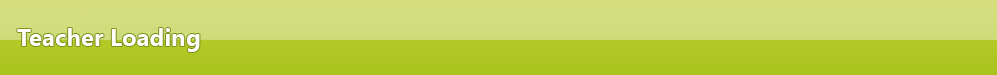
<style>
.page{position:relative;width:997px;height:75px}
.page>*{position:absolute;margin:0}
.t1{font:24px "SegoeUI-Bold";color:#fefefe}
</style>
<div class="page">
<p class="t1" style="left:17px;top:28px;width:183px;height:24px">Teacher Loading</p>
</div>
